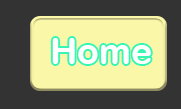
<style>
.page{position:relative;width:181px;height:109px;background:#333333}
.page>*{position:absolute;margin:0}
.t1{font:36px "ArialRoundedMTBold";color:#ffffff}
</style>
<div class="page">
<p class="t1" style="left:52px;top:38px;width:99px;height:26px">Home</p>
</div>
